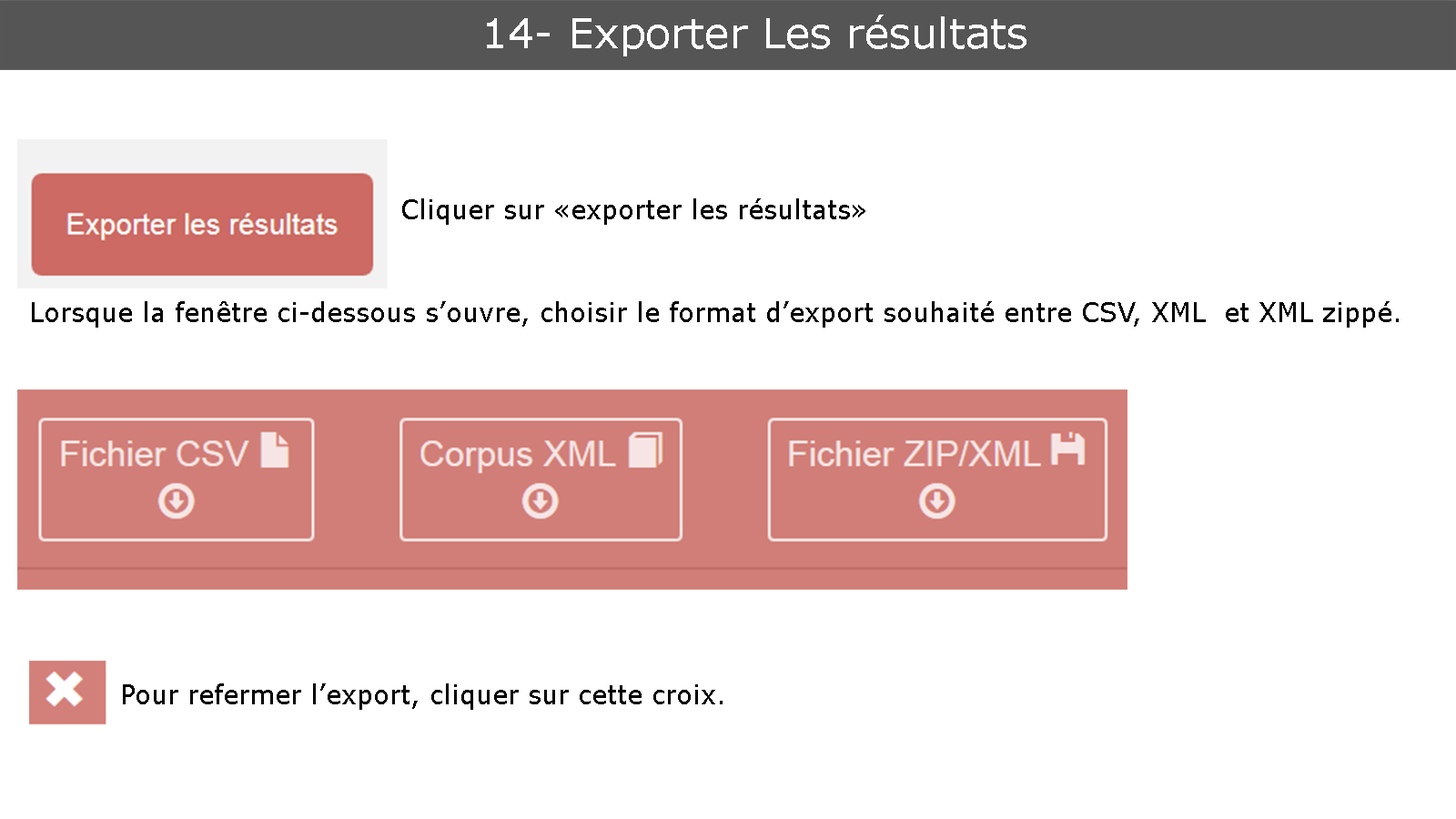
<style>
.page{position:relative;width:1456px;height:819px;background:#ffffff}
.page>*{position:absolute;margin:0}
.t1{font:41.7px "Verdana";color:#ffffff}
.t2{font:26.5px "Verdana";color:#000000}
</style>
<div class="page">
<p class="t1" style="left:487px;top:15px;width:539px;height:41px">14- Exporter Les résultats</p>
<p class="t2" style="left:402px;top:198px;width:463px;height:27px">Cliquer sur «exporter les résultats»</p>
<p class="t2" style="left:32px;top:301px;width:1367px;height:27px">Lorsque la fenêtre ci-dessous s’ouvre, choisir le format d’export souhaité entre CSV, XML  et XML zippé.</p>
<p class="t2" style="left:123px;top:683px;width:600px;height:27px">Pour refermer l’export, cliquer sur cette croix.</p>
</div>
